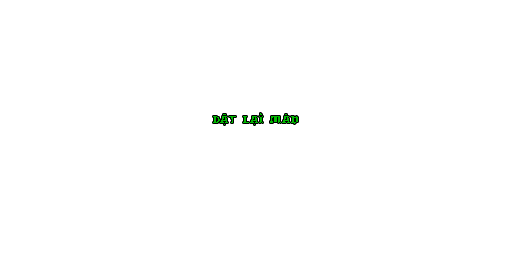
<style>
.page{position:relative;width:512px;height:256px;background:#ffffff}
.page>*{position:absolute;margin:0}
.t1{font:13.3px "drwnstcr";color:#00b800}
</style>
<div class="page">
<p class="t1" style="left:213px;top:113px;width:85px;height:12px">Đặt Lại Màn</p>
</div>
